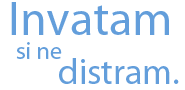
<style>
.page{position:relative;width:185px;height:90px;background:#ffffff}
.page>*{position:absolute;margin:0}
.t1{font:48px "MyriadPro-Regular";color:#639edb}
.t2{font:24px "MyriadPro-Regular";color:#639edb}
.t3{font:36px "MyriadPro-Regular";color:#639edb}
</style>
<div class="page">
<p class="t1" style="left:11px;top:2px;width:158px;height:33px">Invatam</p>
<p class="t2" style="left:16px;top:42px;width:46px;height:17px">si ne</p>
<p class="t3" style="left:59px;top:58px;width:120px;height:26px">distram.</p>
</div>
